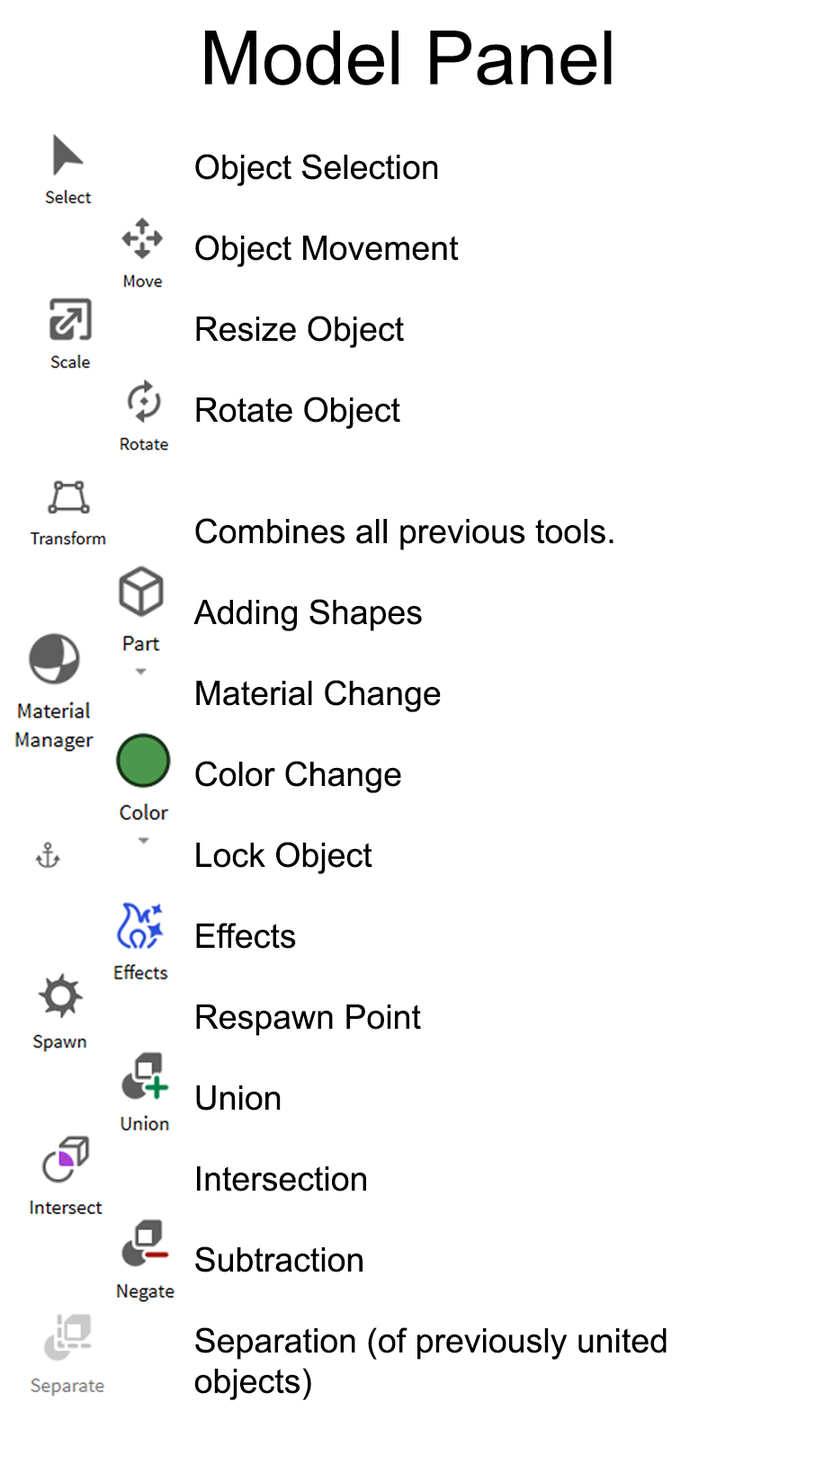
<style>
.page{position:relative;width:815px;height:1464px;background:#ffffff}
.page>*{position:absolute;margin:0}
.t1{font:74.9px "ArialMT";color:#000000}
.t2{font:33.7px "ArialMT";color:#000000}
</style>
<div class="page">
<p class="t1" style="left:205px;top:31px;width:406px;height:54px">Model Panel</p>
<p class="t2" style="left:193px;top:154px;width:473px;height:1246px">Object Selection<br><br>Object Movement<br><br>Resize Object<br><br>Rotate Object<br><br><br>Combines all previous tools.<br><br>Adding Shapes<br><br>Material Change<br><br>Color Change<br><br>Lock Object<br><br>Effects<br><br>Respawn Point<br><br>Union<br><br>Intersection<br><br>Subtraction<br><br>Separation (of previously united objects)</p>
</div>
